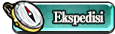
<style>
.page{position:relative;width:115px;height:34px}
.page>*{position:absolute;margin:0}
.t1{font:14px "RyuminPro-ExBold";letter-spacing:-0.08em;color:#fff4ee;font-weight:bold;scale:0.9 1}
</style>
<div class="page">
<p class="t1" style="left:53px;top:11px;width:51px;height:14px">Ekspedisi</p>
</div>
